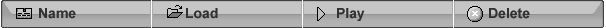
<style>
.page{position:relative;width:606px;height:28px;background:#c6c6c6}
.page>*{position:absolute;margin:0}
.t1{font:14px "Arial-BoldMT";color:#323232}
</style>
<div class="page">
<p class="t1" style="left:39px;top:8px;width:37px;height:11px">Name</p>
<p class="t1" style="left:186px;top:8px;width:32px;height:11px">Load</p>
<p class="t1" style="left:337px;top:8px;width:28px;height:13px">Play</p>
<p class="t1" style="left:489px;top:8px;width:41px;height:11px">Delete</p>
</div>
